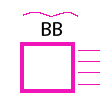
<style>
.page{position:relative;width:100px;height:100px;background:#ffffff}
.page>*{position:absolute;margin:0}
.t1{font:20.8px "MyriadPro-Regular";color:#000000}
</style>
<div class="page">
<p class="t1" style="left:41px;top:22px;width:22px;height:14px">BB</p>
</div>
